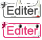
<style>
.page{position:relative;width:42px;height:40px;background:#ffffff}
.page>*{position:absolute;margin:0}
.t1{font:12px "ArialMT";color:#4a4a4a}
.t2{font:12px "ArialMT";color:#e43f78}
</style>
<div class="page">
<p class="t1" style="left:7px;top:6px;width:31px;height:9px">Editer</p>
<p class="t2" style="left:7px;top:26px;width:31px;height:9px">Editer</p>
</div>
